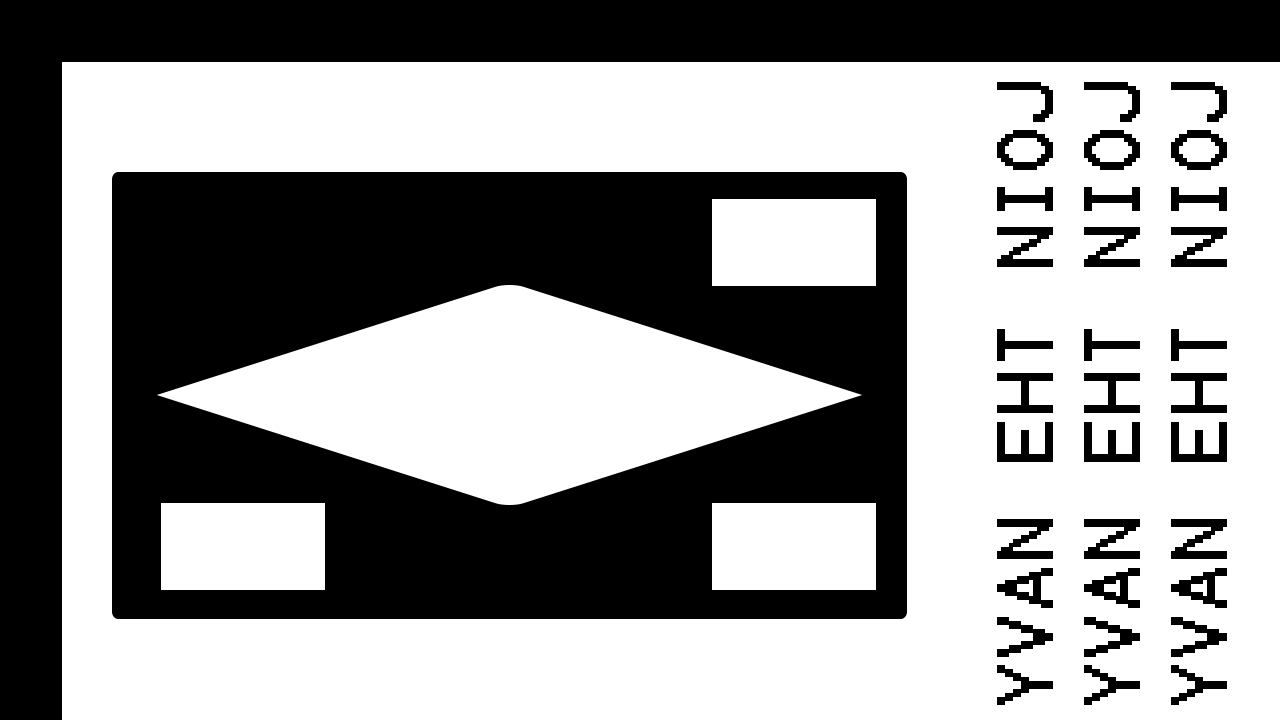
<style>
.page{position:relative;width:1280px;height:720px;background:#ffffff}
.page>*{position:absolute;margin:0}
.t1{font:64px "Terminal";letter-spacing:0.01em;color:#000000}
</style>
<div class="page">
<p class="t1" style="left:997px;top:82px;width:56px;height:623px;rotate:-90deg">YVAN EHT NIOJ</p>
<p class="t1" style="left:1084px;top:82px;width:56px;height:623px;rotate:-90deg">YVAN EHT NIOJ</p>
<p class="t1" style="left:1171px;top:82px;width:56px;height:623px;rotate:-90deg">YVAN EHT NIOJ</p>
</div>
